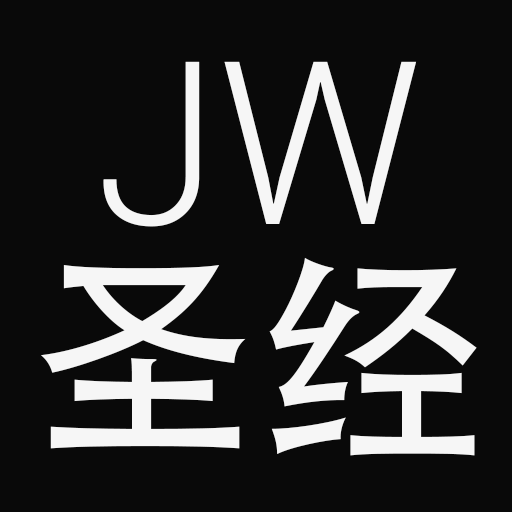
<style>
.page{position:relative;width:512px;height:512px;background:#090909}
.page>*{position:absolute;margin:0}
.t1{font:228px "Roboto-Light";color:#f6f6f6}
.t2{font:228px "AdobeHeitiStd-Regular";color:#f6f6f6}
</style>
<div class="page">
<p class="t1" style="left:103px;top:61px;width:314px;height:166px">JW</p>
<p class="t2" style="left:41px;top:257px;width:436px;height:199px">圣经</p>
</div>
